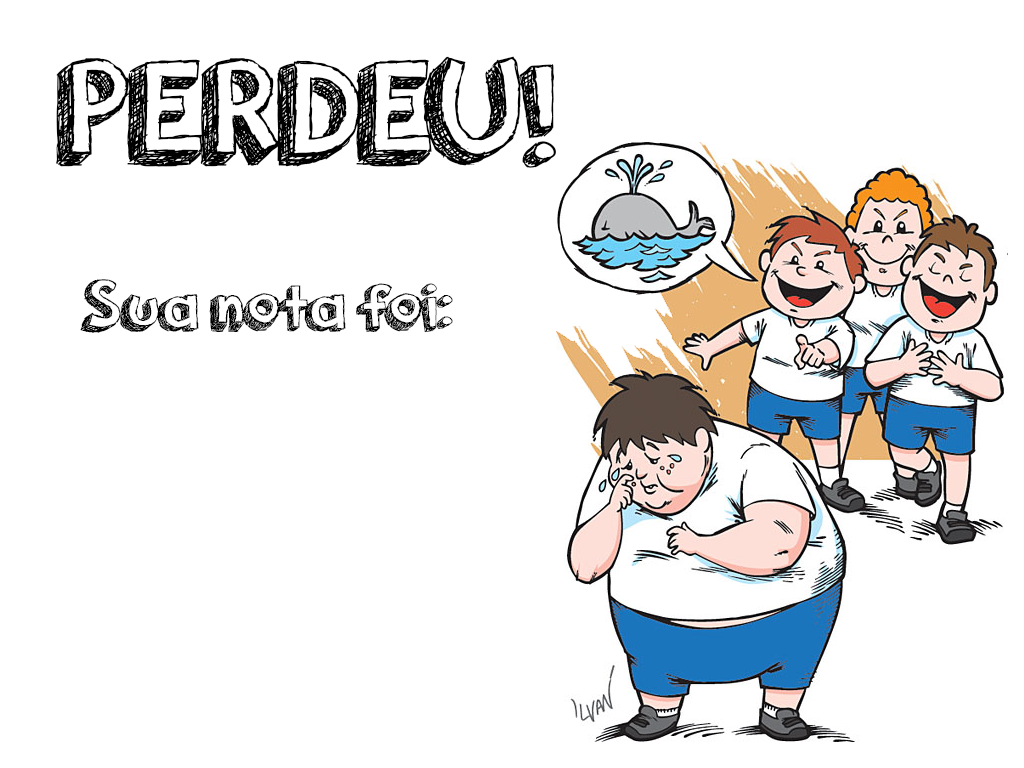
<style>
.page{position:relative;width:1024px;height:768px;background:#ffffff}
.page>*{position:absolute;margin:0}
.t1{font:150px "orangejuice";color:#000000}
.t2{font:72px "orangejuice";color:#000000}
</style>
<div class="page">
<p class="t1" style="left:56px;top:56px;width:500px;height:112px">PERDEU!</p>
<p class="t2" style="left:80px;top:279px;width:373px;height:54px">Sua nota foi:</p>
</div>
